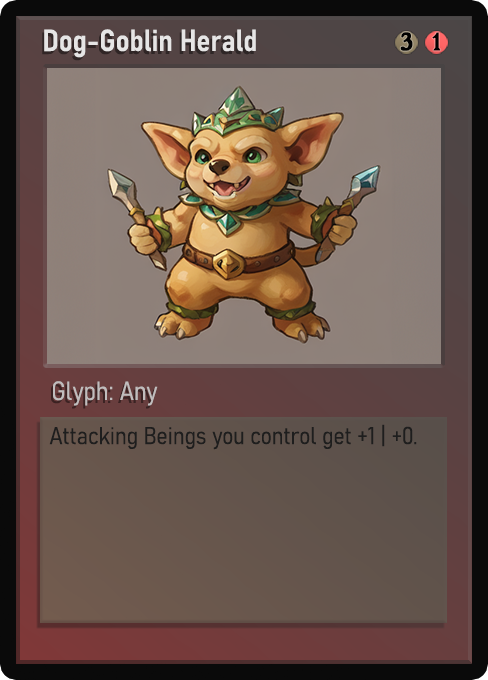
<style>
.page{position:relative;width:488px;height:680px}
.page>*{position:absolute;margin:0}
.t1{font:30px "Bahnschrift-SemiBoldSemiCondensed";color:#f2f2f2;font-weight:bold}
.t2{font:25px "WTRRoycroft";color:#000000;font-weight:bold;scale:1.09 1}
.t3{font:26px "Bahnschrift-LightSemiCondensed";color:#c8c8c8;font-weight:bold}
.t4{font:24px "Bahnschrift-LightSemiCondensed";color:#1e1e1e;font-weight:bold}
</style>
<div class="page">
<p class="t1" style="left:44px;top:29px;width:212px;height:29px;opacity:0.9">Dog-Goblin Herald</p>
<p class="t2" style="left:400px;top:32px;width:13px;height:19px">3</p>
<p class="t2" style="left:432px;top:32px;width:9px;height:19px">1</p>
<p class="t3" style="left:53px;top:381px;width:105px;height:25px;opacity:0.9">Glyph: Any</p>
<p class="t4" style="left:49px;top:424px;width:368px;height:26px">Attacking Beings you control get +1 | +0.</p>
</div>
